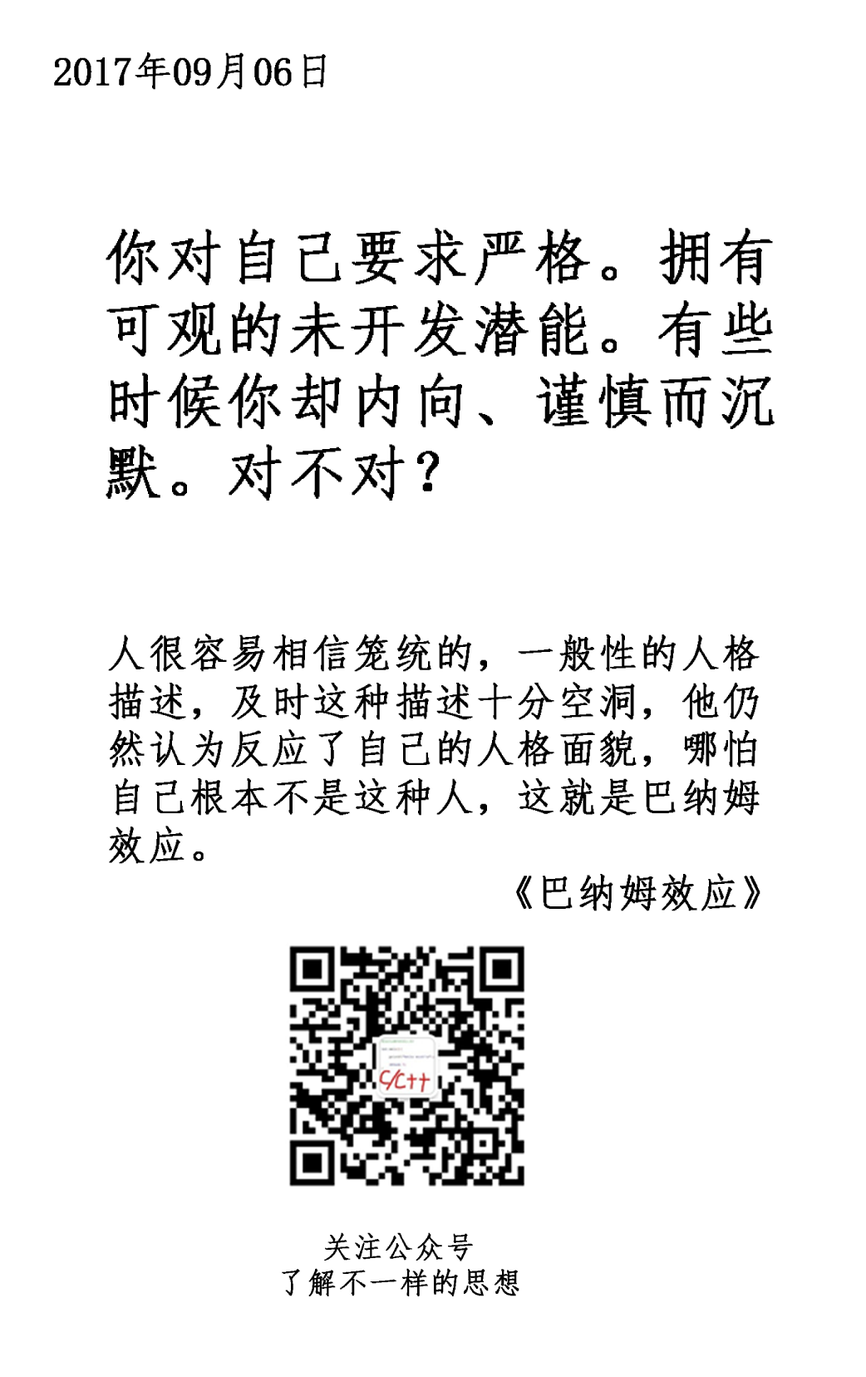
<style>
.page{position:relative;width:866px;height:1377px;background:#ffffff}
.page>*{position:absolute;margin:0}
.t1{font:39.9px "·ÂËÎ-Regular";color:#000000;font-weight:bold}
.t2{font:59.9px "·ÂËÎ-Regular";letter-spacing:0.025em;color:#000000;font-weight:bold}
.t3{font:39.9px "·ÂËÎ-Regular";letter-spacing:0.025em;color:#000000;font-weight:bold}
.t4{font:29.9px "·ÂËÎ-Regular";letter-spacing:0.025em;color:#000000;font-weight:bold}
</style>
<div class="page">
<p class="t1" style="left:54px;top:52px;width:272px;height:38px">2017年09月06日</p>
<p class="t2" style="left:106px;top:228px;width:669px;height:272px">你对自己要求严格。拥有可观的未开发潜能。有些时候你却内向、谨慎而沉默。对不对？</p>
<p class="t3" style="left:108px;top:633px;width:653px;height:278px">人很容易相信笼统的，一般性的人格描述，及时这种描述十分空洞，他仍然认为反应了自己的人格面貌，哪怕自己根本不是这种人，这就是巴纳姆效应。<br>《巴纳姆效应》</p>
<p class="t4" style="left:282px;top:1232px;width:238px;height:64px;text-align:center">关注公众号<br>了解不一样的思想</p>
</div>
